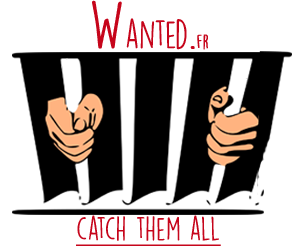
<style>
.page{position:relative;width:295px;height:246px;background:#ffffff}
.page>*{position:absolute;margin:0}
.t1{font:36px "DKLemonYellowSun";color:#c6051b}
.t2{font:60px "DKLemonYellowSun";color:#c6051b}
.t3{font:36px "DKLemonYellowSun";color:#c6051b;font-weight:bold}
.t4{font:18px "DKLemonYellowSun";color:#c6051b;font-weight:bold}
.t5{font:30px "DKLemonYellowSun";color:#c6051b;text-decoration:underline}
</style>
<div class="page">
<p class="t1" style="left:92px;top:0px;width:116px;height:50px"><span class="t2">W</span>anted<span class="t3">.</span><span class="t4">fr</span></p>
<p class="t5" style="left:76px;top:215px;width:145px;height:31px">catch them all</p>
</div>
